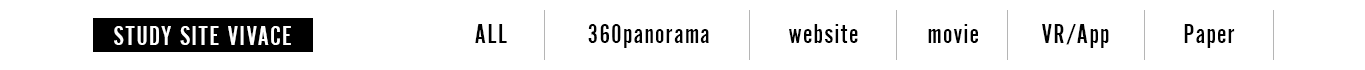
<style>
.page{position:relative;width:1365px;height:70px;background:#ffffff}
.page>*{position:absolute;margin:0}
.t1{font:28px "AlternateGothicSB-NoTwo";letter-spacing:0.025em;color:#ffffff}
.t2{font:28px "AlternateGothicSB-NoTwo";letter-spacing:0.025em;color:#000000}
</style>
<div class="page">
<p class="t1" style="left:114px;top:26px;width:177px;height:19px">STUDY SITE VIVACE</p>
<p class="t2" style="left:475px;top:24px;width:32px;height:19px">ALL</p>
<p class="t2" style="left:588px;top:24px;width:121px;height:24px">360panorama</p>
<p class="t2" style="left:789px;top:24px;width:69px;height:19px">website</p>
<p class="t2" style="left:928px;top:24px;width:50px;height:19px">movie</p>
<p class="t2" style="left:1042px;top:24px;width:67px;height:24px">VR/App</p>
<p class="t2" style="left:1184px;top:24px;width:51px;height:24px">Paper</p>
</div>
